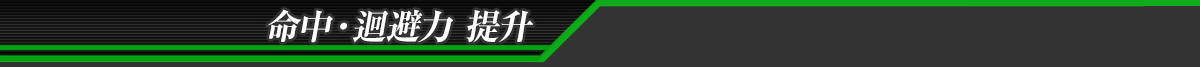
<style>
.page{position:relative;width:1200px;height:67px;background:#333333}
.page>*{position:absolute;margin:0}
.t1{font:35px "RyuminPro-ExBold";color:#ffffff;font-style:italic}
</style>
<div class="page">
<p class="t1" style="left:267px;top:9px;width:266px;height:34px">命中·迴避力 提升</p>
</div>
